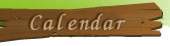
<style>
.page{position:relative;width:170px;height:46px}
.page>*{position:absolute;margin:0}
.t1{font:24px "SingkaiEG-Bold-GB";color:#c2a279}
</style>
<div class="page">
<p class="t1" style="left:30px;top:13px;width:96px;height:18px">Calendar</p>
</div>
